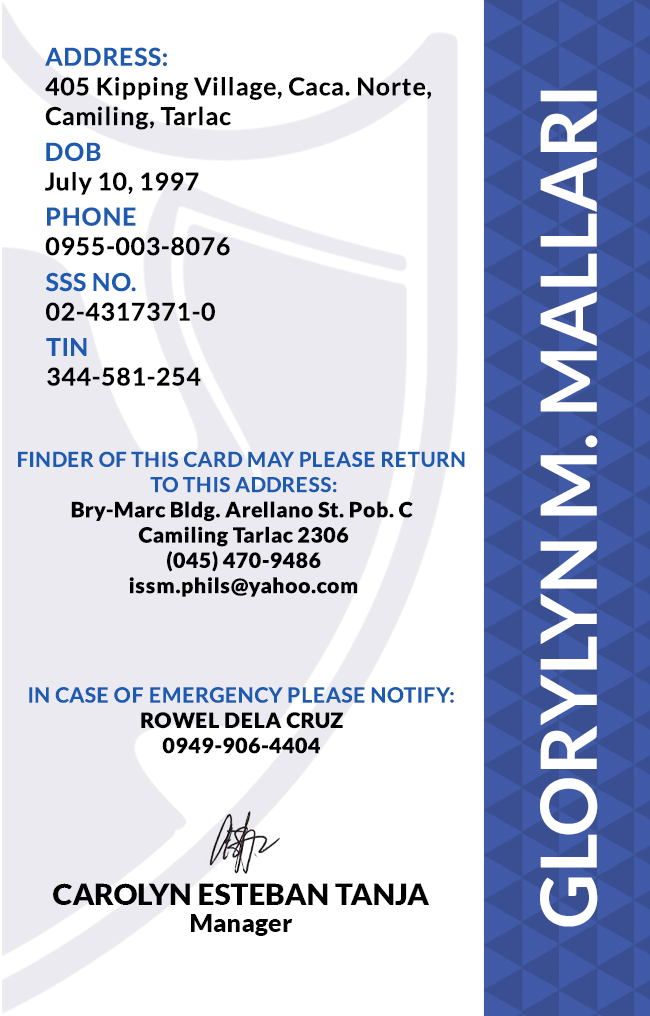
<style>
.page{position:relative;width:650px;height:1016px;background:#ffffff}
.page>*{position:absolute;margin:0}
.t1{font:24.7px/29.6px "Lato-Bold";letter-spacing:0.025em;color:#000000}
.t2{font:77.6px "Lato-Bold";color:#ffffff}
.t3{font:24.7px/29.6px "Lato-Bold";letter-spacing:0.025em}
.t4{font:21.1px "Lato-Black";letter-spacing:0.025em}
.t5{font:20.5px/25.3px "Lato-Bold";letter-spacing:0.025em;text-transform:uppercase}
.t6{font:21.1px/25.3px "Lato-Bold";letter-spacing:0.025em}
.t7{font:29.5px "Lato-Black";color:#000000}
.t8{font:25px "Lato-Black";color:#000000}
</style>
<div class="page">
<p class="t1" style="left:45px;top:47px;width:387px;height:83px">ADDRESS:<br>405 Kipping Village, Caca. Norte,<br>Camiling, Tarlac</p>
<p class="t2" style="left:540px;top:90px;width:58px;height:837px;rotate:-90deg">GLORYLYN M. MALLARI</p>
<p class="t3" style="left:45px;top:142px;width:154px;height:53px">DOB<br>July 10, 1997</p>
<p class="t3" style="left:45px;top:207px;width:185px;height:49px">PHONE <br>0955-003-8076</p>
<p class="t3" style="left:45px;top:272px;width:170px;height:49px">SSS NO.<br>02-4317371-0</p>
<p class="t1" style="left:46px;top:338px;width:155px;height:48px">TIN<br>344-581-254</p>
<p class="t4" style="left:18px;top:451px;width:447px;height:146px;text-align:center"><span class="t5">Finder of this card may please return <br>to this address:<br></span>Bry-Marc Bldg. Arellano St. Pob. C <br>Camiling Tarlac 2306<br>(045) 470-9486<br>issm.phils@yahoo.com</p>
<p class="t6" style="left:29px;top:687px;width:425px;height:67px;text-align:center">IN CASE OF EMERGENCY PLEASE NOTIFY:<br><span class="t4">ROWEL DELA CRUZ<br>0949-906-4404</span></p>
<p class="t7" style="left:53px;top:883px;width:376px;height:22px">CAROLYN ESTEBAN TANJA</p>
<p class="t8" style="left:191px;top:914px;width:102px;height:22px">Manager</p>
</div>
